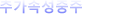
<style>
.page{position:relative;width:128px;height:16px;background:#ffffff}
.page>*{position:absolute;margin:0}
.t1{font:14px "MalgunGothicBold"}
</style>
<div class="page">
<p class="t1" style="left:0px;top:0px;width:82px;height:14px">추가속성중주</p>
</div>
